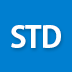
<style>
.page{position:relative;width:72px;height:72px;background:#007fd0}
.page>*{position:absolute;margin:0}
.t1{font:30px "AdobeGothicStd-Bold";letter-spacing:-0.03em;color:#ffffff}
</style>
<div class="page">
<p class="t1" style="left:11px;top:25px;width:50px;height:23px">STD</p>
</div>
